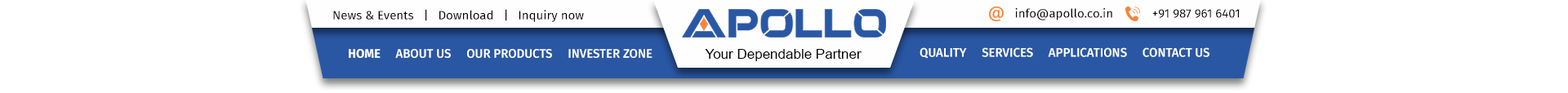
<style>
.page{position:relative;width:1568px;height:93px;background:#ffffff}
.page>*{position:absolute;margin:0}
.t1{font:12.2px "FiraSans-Regular";color:#010101}
.t2{font:12.2px "FiraSans-Regular";color:#000000}
.t3{font:12.2px "FiraSans-Medium";color:#ffffff;text-transform:uppercase}
.t4{font:12.2px "FiraSans-Bold";color:#ffffff;text-transform:uppercase}
.t5{font:13.9px "ArialMT";color:#000000}
</style>
<div class="page">
<p class="t1" style="left:333px;top:9px;width:251px;height:13px">News &amp; Events   |   Download   |   Inquiry now</p>
<p class="t2" style="left:1015px;top:8px;width:224px;height:12px">info@apollo.co.in            +91 987 961 6401</p>
<p class="t3" style="left:349px;top:49px;width:304px;height:9px"><span class="t4">Home </span>    About us     Our Products     Invester Zone</p>
<p class="t5" style="left:705px;top:49px;width:157px;height:12px">Your Dependable Partner</p>
<p class="t3" style="left:920px;top:47px;width:289px;height:12px">Quality     Services     Applications     Contact us</p>
</div>
